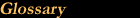
<style>
.page{position:relative;width:140px;height:18px;background:#000000}
.page>*{position:absolute;margin:0}
.t1{font:18px "Garamond-Bold";color:#fec45f;font-style:italic}
</style>
<div class="page">
<p class="t1" style="left:0px;top:2px;width:67px;height:17px">Glossary</p>
</div>
